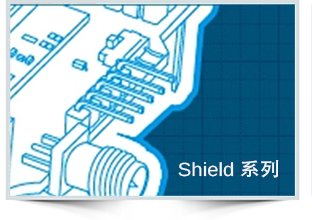
<style>
.page{position:relative;width:312px;height:220px}
.page>*{position:absolute;margin:0}
.t1{font:19.1px "Arimo";color:#ffffff;scale:1.06 1}
.t2{font:19.1px "AdobeHeitiStd-Regular";color:#ffffff;scale:1.06 1}
</style>
<div class="page">
<p class="t1" style="left:178px;top:160px;width:101px;height:18px;opacity:0.92">Shield <span class="t2">系列</span></p>
</div>
